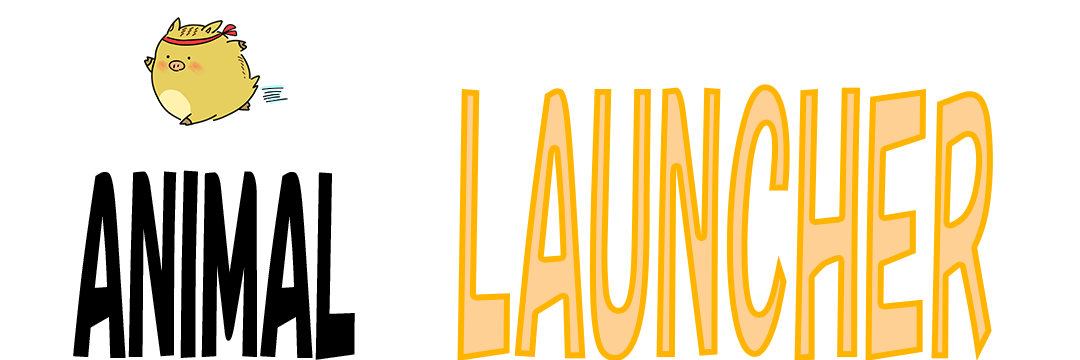
<style>
.page{position:relative;width:1080px;height:360px;background:#ffffff}
.page>*{position:absolute;margin:0}
.t1{font:333.3px "HGSSoeiKakupoptai";scale:0.33 1}
.t2{font:229.2px "HGSSoeiKakupoptai";color:#000000;scale:0.35 1}
</style>
<div class="page">
<p class="t1" style="left:457px;top:84px;width:536px;height:277px">LAUNCHER</p>
<p class="t2" style="left:73px;top:170px;width:282px;height:190px">ANIMAL</p>
</div>
